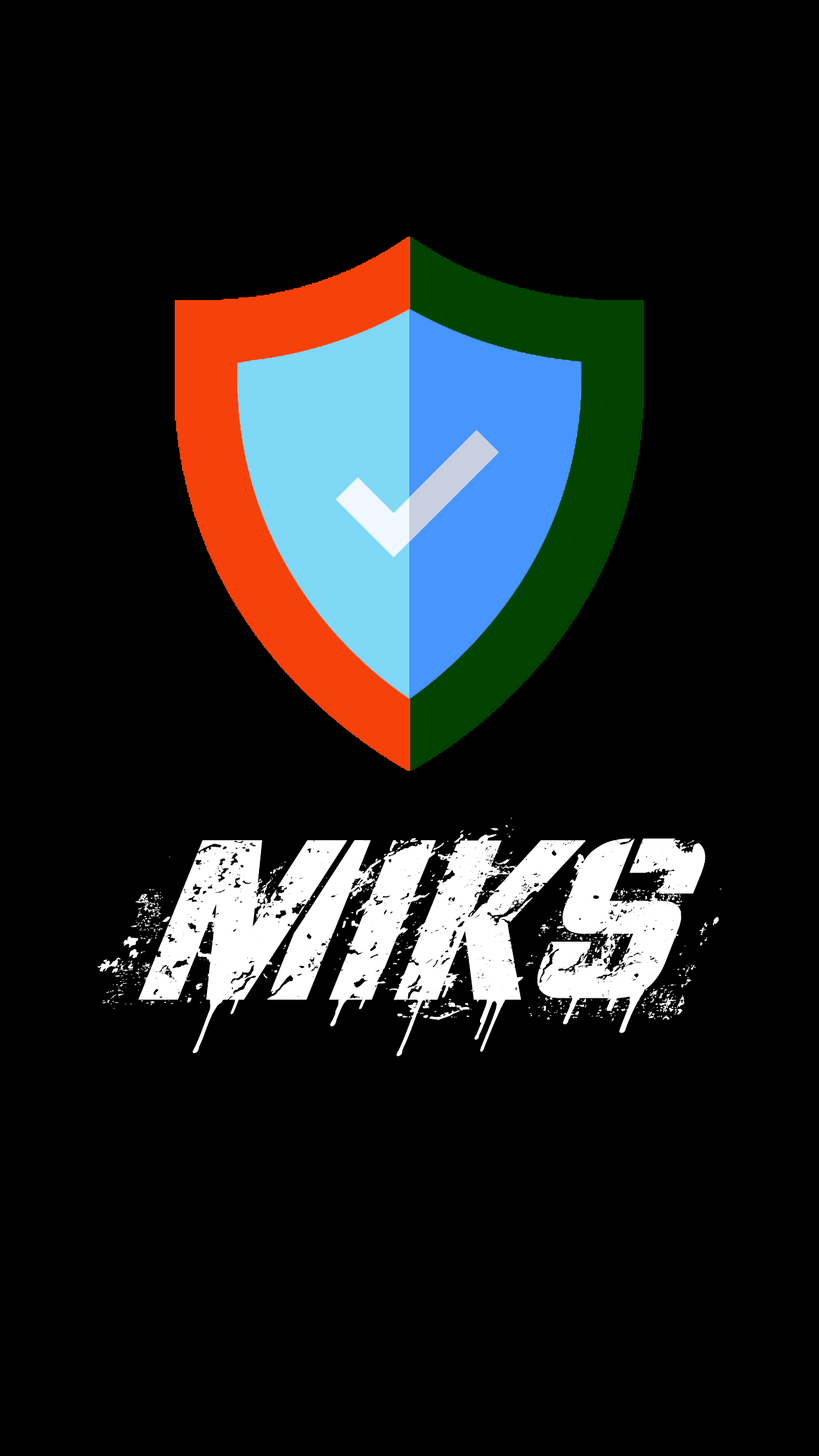
<style>
.page{position:relative;width:819px;height:1456px;background:#000000}
.page>*{position:absolute;margin:0}
.t1{font:230.8px "Rifles-Regular";color:#ffffff}
</style>
<div class="page">
<p class="t1" style="left:98px;top:818px;width:623px;height:238px">MIKS</p>
</div>
